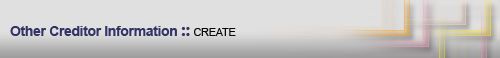
<style>
.page{position:relative;width:500px;height:58px;background:#e1e0e0}
.page>*{position:absolute;margin:0}
.t1{font:14px "Arial-BoldMT";letter-spacing:-0.025em;color:#333366}
.t2{font:18px "SegoeUI-Bold";letter-spacing:-0.025em;color:#333366}
.t3{font:11px "ArialMT";letter-spacing:-0.025em;color:#070707}
</style>
<div class="page">
<p class="t1" style="left:10px;top:26px;width:226px;height:10px">Other Creditor Information <span class="t2">:: </span><span class="t3">CREATE</span></p>
</div>
